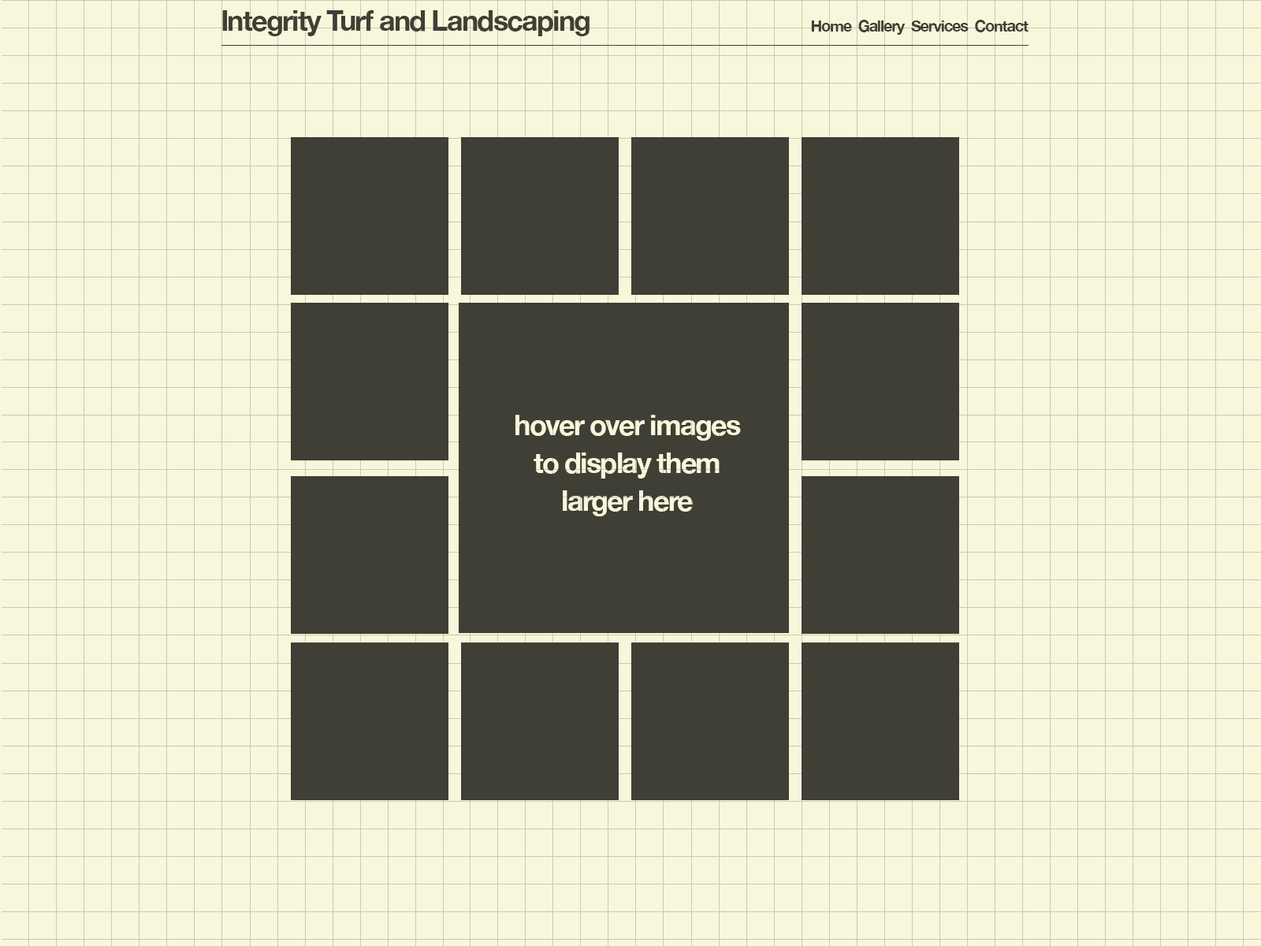
<style>
.page{position:relative;width:1261px;height:946px;background:#f8f7db}
.page>*{position:absolute;margin:0}
.t1{font:28.4px "HelveticaNeue-Bold";letter-spacing:-0.05em;color:#403f36}
.t2{font:15.4px "HelveticaNeue-Bold";letter-spacing:-0.05em;color:#403f36}
.t3{font:28.4px/37.8px "HelveticaNeue-Bold";letter-spacing:-0.05em;color:#f8f7db}
</style>
<div class="page">
<p class="t1" style="left:222px;top:10px;width:367px;height:26px">Integrity Turf and Landscaping</p>
<p class="t2" style="left:811px;top:20px;width:217px;height:15px">Home  Gallery  Services  Contact</p>
<p class="t3" style="left:515px;top:415px;width:226px;height:101px;text-align:center">hover over images to display them larger here</p>
</div>
